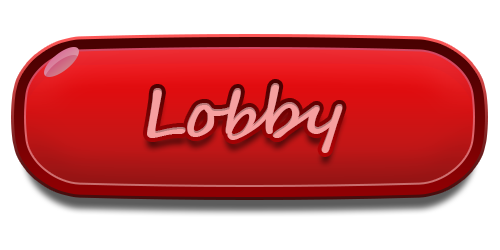
<style>
.page{position:relative;width:500px;height:250px;background:#ffffff}
.page>*{position:absolute;margin:0}
.t1{font:66.7px "SegoeScript-Bold";color:#f59f9f}
</style>
<div class="page">
<p class="t1" style="left:147px;top:83px;width:196px;height:70px">Lobby</p>
</div>
